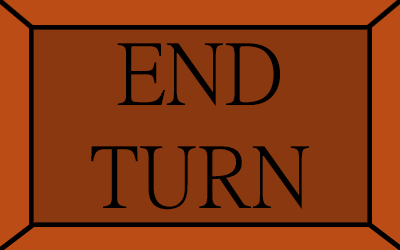
<style>
.page{position:relative;width:400px;height:250px;background:#893810}
.page>*{position:absolute;margin:0}
.t1{font:86px "PMingLiU-ExtB";color:#000000}
</style>
<div class="page">
<p class="t1" style="left:91px;top:43px;width:218px;height:167px;text-align:center">END<br>TURN</p>
</div>
